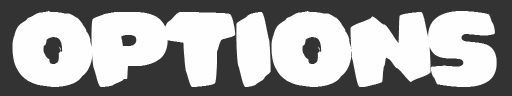
<style>
.page{position:relative;width:512px;height:96px;background:#fefefe}
.page>*{position:absolute;margin:0}
.t1{font:100px "Bomberman";color:#fefefe}
</style>
<div class="page">
<p class="t1" style="left:12px;top:11px;width:485px;height:76px">Options</p>
</div>
